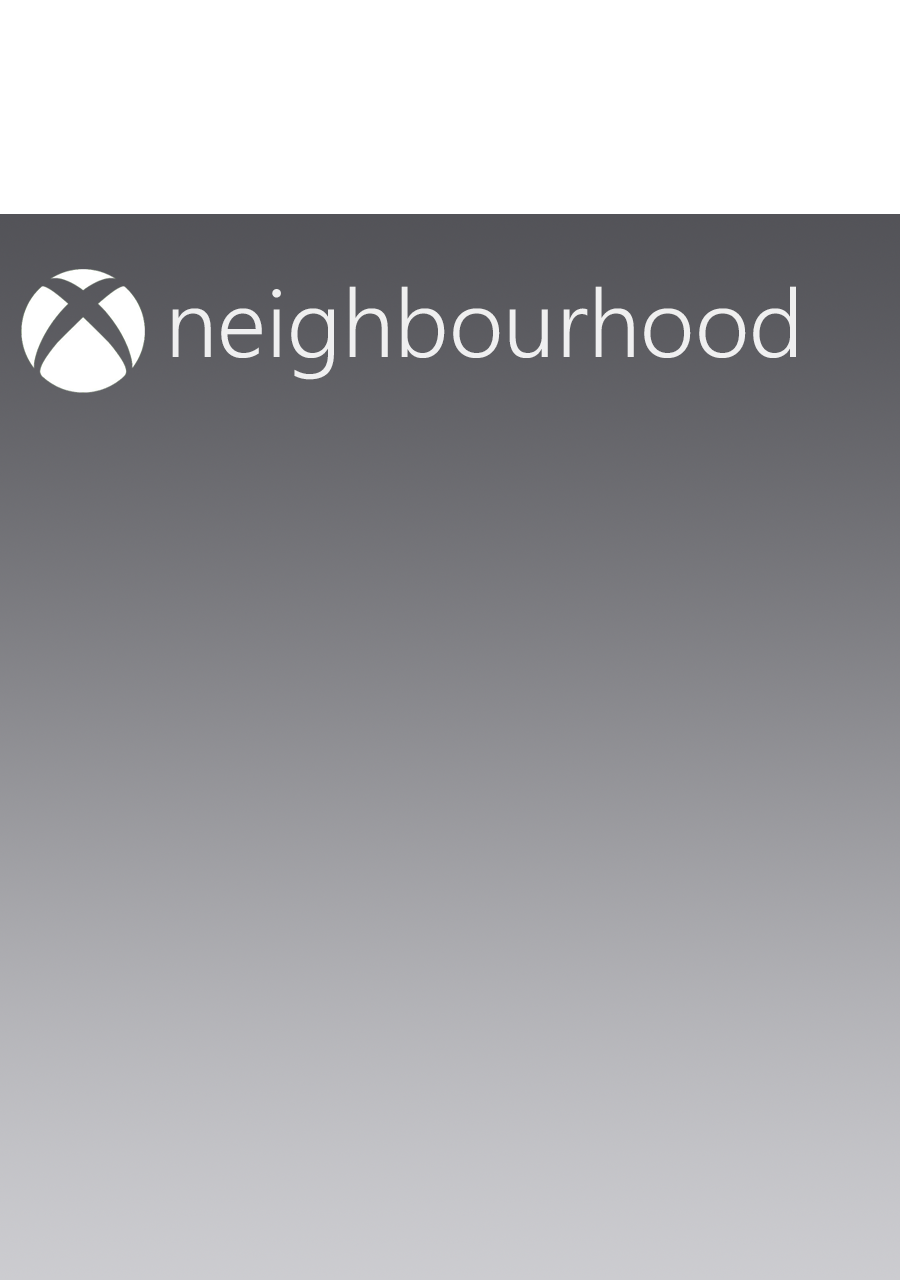
<style>
.page{position:relative;width:900px;height:1280px}
.page>*{position:absolute;margin:0}
.t1{font:95px "SegoeWP-SemiLight";color:#ffffff}
</style>
<div class="page">
<p class="t1" style="left:172px;top:286px;width:624px;height:94px;opacity:0.88">neighbourhood</p>
</div>
